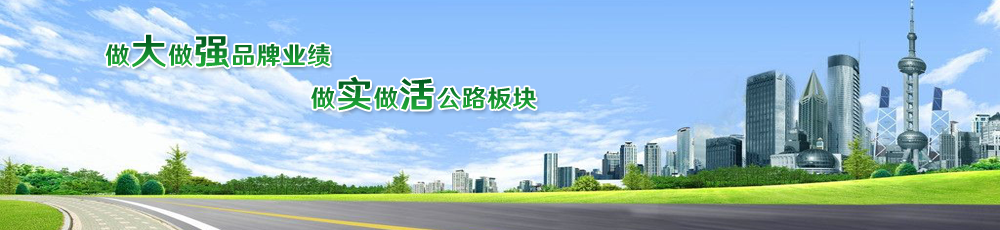
<style>
.page{position:relative;width:1000px;height:230px}
.page>*{position:absolute;margin:0}
.t1{font:24px "HYWenHei-HEW";letter-spacing:0.05em}
.t2{font:36px "HYWenHei-HEW";letter-spacing:0.05em}
</style>
<div class="page">
<p class="t1" style="left:105px;top:34px;width:225px;height:34px">做<span class="t2">大</span>做<span class="t2">强</span>品牌业绩</p>
<p class="t1" style="left:311px;top:76px;width:225px;height:35px">做<span class="t2">实</span>做<span class="t2">活</span>公路板块</p>
</div>
